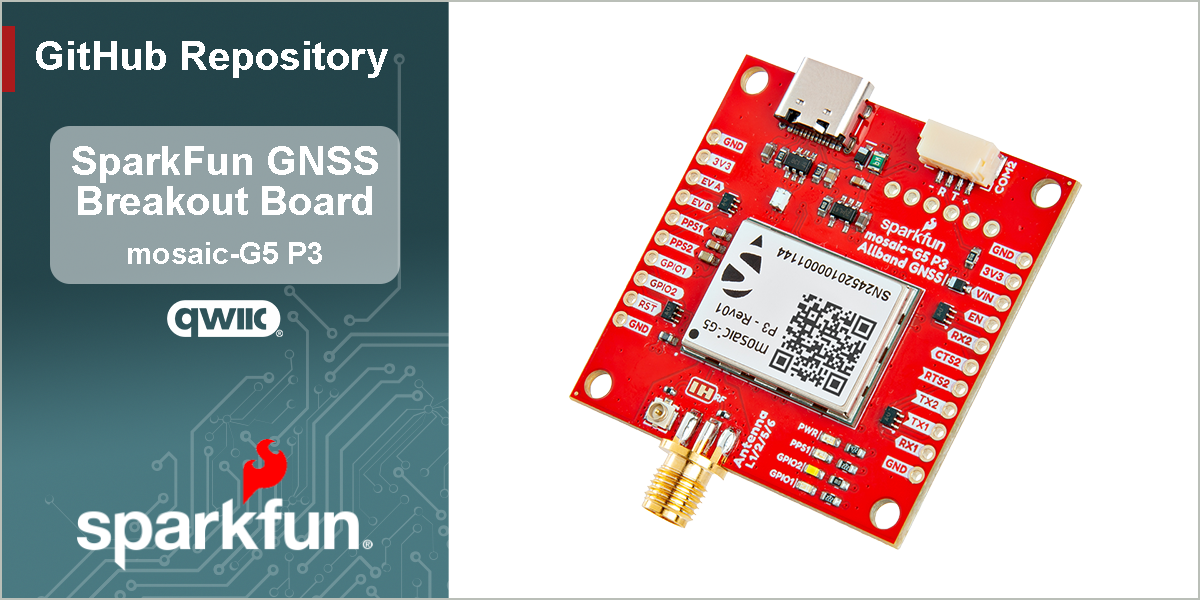
<style>
.page{position:relative;width:1200px;height:600px;background:#ffffff}
.page>*{position:absolute;margin:0}
.t1{font:40px "Arial-BoldMT";color:#ffffff}
.t2{font:30px "Arial-BoldMT";color:#ffffff}
</style>
<div class="page">
<p class="t1" style="left:36px;top:41px;width:352px;height:37px">GitHub Repository</p>
<p class="t1" style="left:72px;top:146px;width:306px;height:69px;text-align:center">SparkFun GNSS<br>Breakout Board</p>
<p class="t2" style="left:128px;top:242px;width:194px;height:22px">mosaic-G5 P3</p>
</div>
